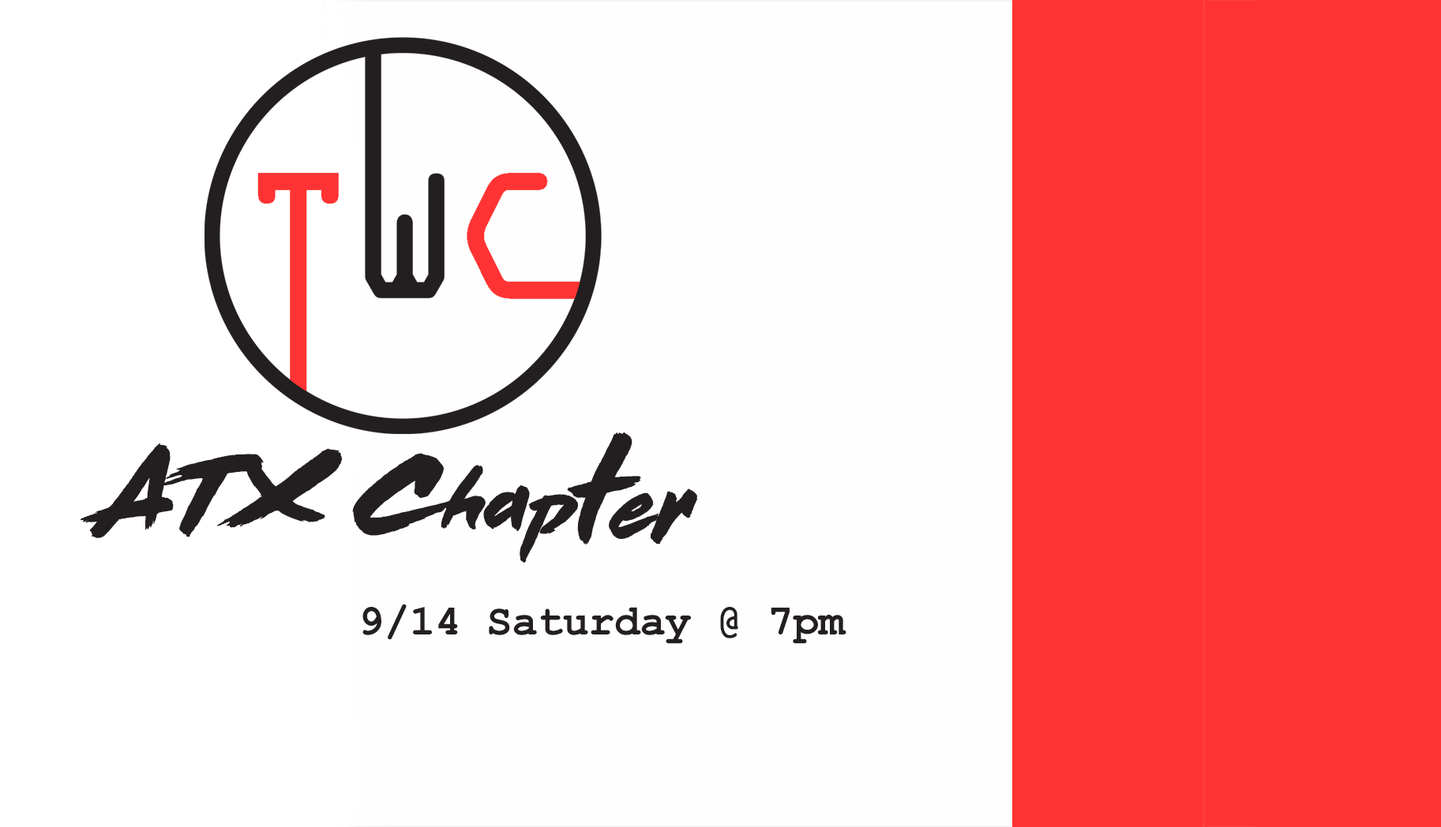
<style>
.page{position:relative;width:1441px;height:827px;background:#fefefe}
.page>*{position:absolute;margin:0}
.t1{font:110.4px "DeadStock";color:#231f20}
.t2{font:84.6px "DeadStock";color:#231f20}
.t3{font:91.5px "DeadStock";color:#231f20}
.t4{font:139px "DeadStock";letter-spacing:-0.12em;color:#231f20}
.t5{font:93.8px "DeadStock";color:#231f20}
.t6{font:105.8px "DeadStock";color:#231f20}
.t7{font:42.6px "CourierNewPS-BoldMT";color:#231f20}
</style>
<div class="page">
<p class="t1" style="left:81px;top:432px;width:616px;height:131px">ATX C<span class="t2">ha</span><span class="t3">p</span><span class="t4">t</span><span class="t5">e</span><span class="t6">r</span></p>
<p class="t7" style="left:362px;top:604px;width:484px;height:40px">9/14 Saturday @ 7pm</p>
</div>
